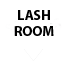
<style>
.page{position:relative;width:66px;height:61px;background:#ffffff}
.page>*{position:absolute;margin:0}
.t1{font:14px "MyriadPro-Bold";color:#000000}
.t2{font:18px "MyriadPro-Regular";color:#000000}
</style>
<div class="page">
<p class="t1" style="left:14px;top:10px;width:40px;height:26px;text-align:center">LASH<br>ROOM<br><span class="t2">R</span></p>
</div>
